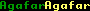
<style>
.page{position:relative;width:90px;height:11px;background:#000000}
.page>*{position:absolute;margin:0}
.t1{font:13.2px "Onesize";color:#009900;scale:0.91 1}
.t2{font:13.2px "Onesize";color:#ffff66;scale:0.91 1}
</style>
<div class="page">
<p class="t1" style="left:0px;top:1px;width:45px;height:10px">Agafar</p>
<p class="t2" style="left:45px;top:1px;width:45px;height:10px">Agafar</p>
</div>
